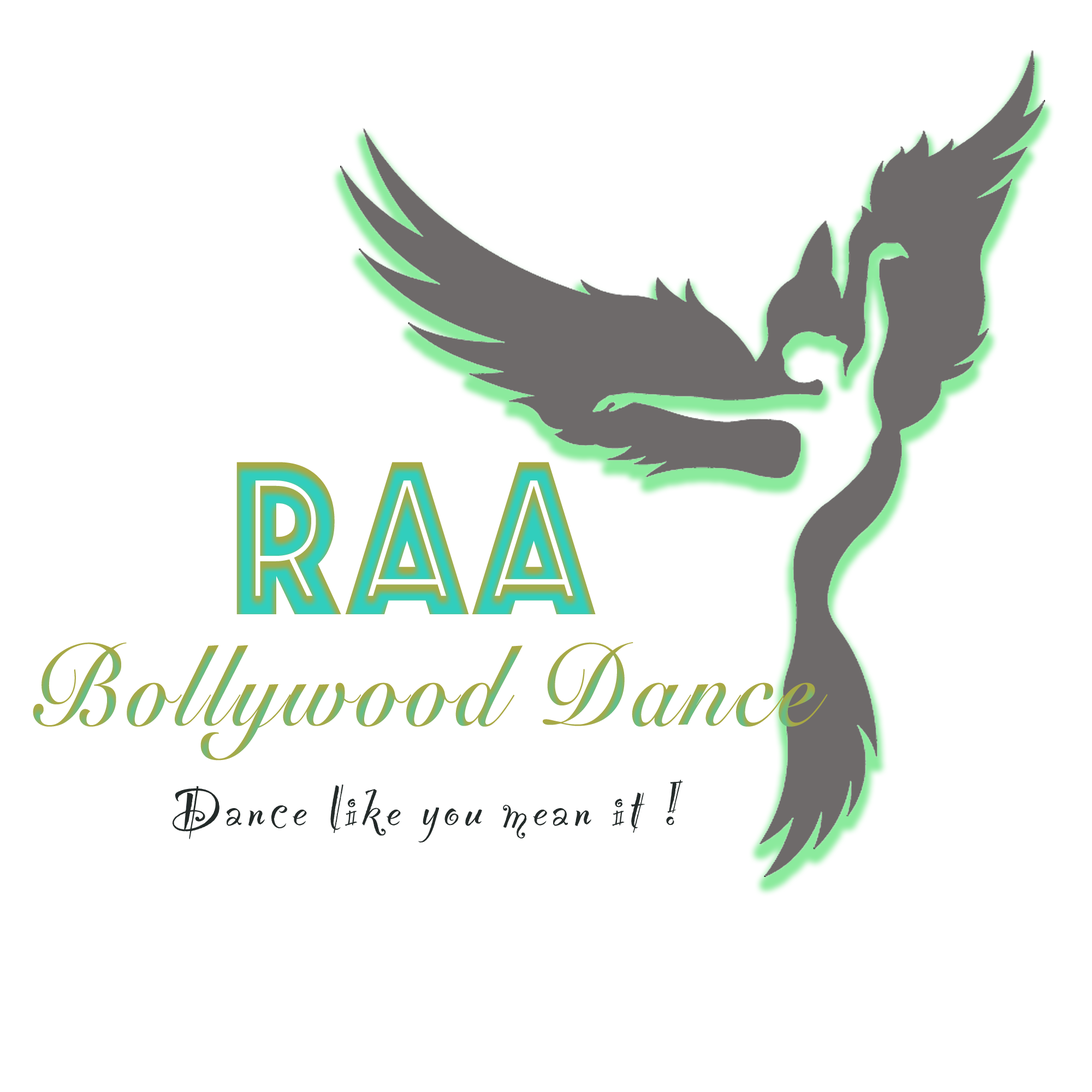
<style>
.page{position:relative;width:1092px;height:1092px;background:#ffffff}
.page>*{position:absolute;margin:0}
.t1{font:113.8px/110.7px "SnellRoundhand-Bold";letter-spacing:0.06em;scale:0.81 1}
.t2{font:227.7px/110.7px "Phosphate-Inline";letter-spacing:0.06em;scale:0.81 1}
.t3{font:68.2px "PartyLetPlain";letter-spacing:0.06em;color:#232a29}
</style>
<div class="page">
<p class="t1" style="left:33px;top:462px;width:795px;height:299px;text-align:center"><span class="t2">Raa<br></span> Bollywood Dance</p>
<p class="t3" style="left:172px;top:780px;width:511px;height:62px">Dance like you mean it !</p>
</div>
